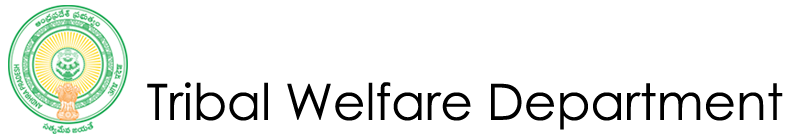
<style>
.page{position:relative;width:792px;height:138px;background:#ffffff}
.page>*{position:absolute;margin:0}
.t1{font:50px "CenturyGothic";color:#000000}
</style>
<div class="page">
<p class="t1" style="left:147px;top:82px;width:636px;height:48px">Tribal Welfare Department</p>
</div>
